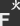
<style>
.page{position:relative;width:20px;height:26px;background:#333333}
.page>*{position:absolute;margin:0}
.t1{font:12px "DFKaiShu-SB-Estd-BF";color:#ececec;font-weight:bold}
.t2{font:18px "ArialMT";color:#ececec;font-weight:bold}
</style>
<div class="page">
<p class="t1" style="left:11px;top:0px;width:11px;height:10px">火</p>
<p class="t2" style="left:0px;top:13px;width:10px;height:14px">F</p>
</div>
